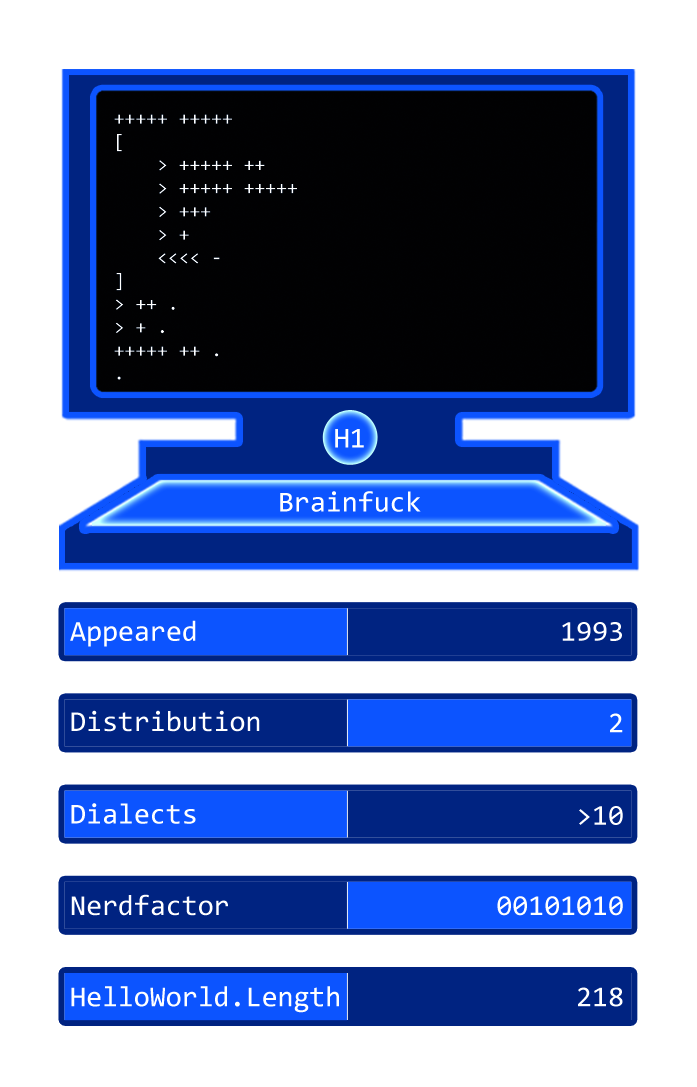
<style>
.page{position:relative;width:697px;height:1087px;background:#ffffff}
.page>*{position:absolute;margin:0}
.t1{font:19.3px "Consolas";color:#ffffff}
.t2{font:29px "Consolas";color:#ffffff}
</style>
<div class="page">
<p class="t1" style="left:114px;top:114px;width:183px;height:266px">+++++ +++++<br>[<br>    &gt; +++++ ++<br>    &gt; +++++ +++++<br>    &gt; +++<br>    &gt; +<br>    &lt;&lt;&lt;&lt; -<br>]                   <br>&gt; ++ .<br>&gt; + .<br>+++++ ++ .<br>.</p>
<p class="t2" style="left:335px;top:429px;width:29px;height:19px">H1</p>
<p class="t2" style="left:280px;top:491px;width:141px;height:21px">Brainfuck</p>
<p class="t2" style="left:70px;top:620px;width:126px;height:27px">Appeared</p>
<p class="t2" style="left:562px;top:622px;width:60px;height:19px">1993</p>
<p class="t2" style="left:71px;top:710px;width:189px;height:22px">Distribution</p>
<p class="t2" style="left:610px;top:713px;width:13px;height:20px">2</p>
<p class="t2" style="left:71px;top:803px;width:125px;height:21px">Dialects</p>
<p class="t2" style="left:579px;top:806px;width:44px;height:19px">&gt;10</p>
<p class="t2" style="left:71px;top:894px;width:157px;height:22px">Nerdfactor</p>
<p class="t2" style="left:497px;top:896px;width:126px;height:20px">00101010</p>
<p class="t2" style="left:71px;top:986px;width:268px;height:27px">HelloWorld.Length</p>
<p class="t2" style="left:578px;top:987px;width:45px;height:20px">218</p>
</div>
